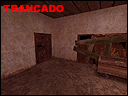
<style>
.page{position:relative;width:128px;height:96px}
.page>*{position:absolute;margin:0}
.t1{font:9.6px "Arial-Black";letter-spacing:0.005em;color:#ff0000;text-transform:uppercase}
</style>
<div class="page">
<p class="t1" style="left:3px;top:5px;width:61px;height:7px">Trancado</p>
</div>
